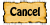
<style>
.page{position:relative;width:50px;height:25px}
.page>*{position:absolute;margin:0}
.t1{font:10px "HoboStd";color:#010101}
</style>
<div class="page">
<p class="t1" style="left:10px;top:7px;width:30px;height:9px">Cancel</p>
</div>
